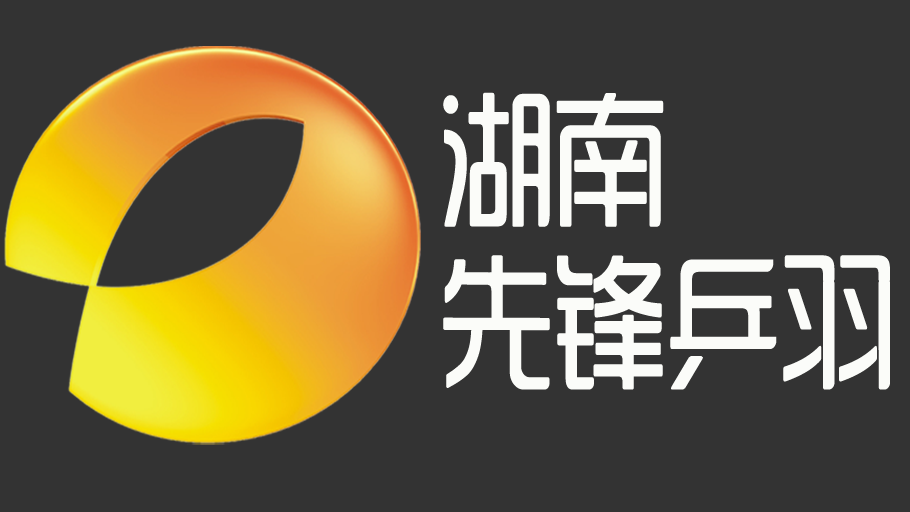
<style>
.page{position:relative;width:910px;height:512px;background:#333333}
.page>*{position:absolute;margin:0}
.t1{font:147.2px/162.7px "SJyunlvyuan";letter-spacing:-0.075em;color:#fbfcf9;scale:0.83 1}
</style>
<div class="page">
<p class="t1" style="left:443px;top:92px;width:447px;height:298px">湖南<br>先锋乒羽</p>
</div>
